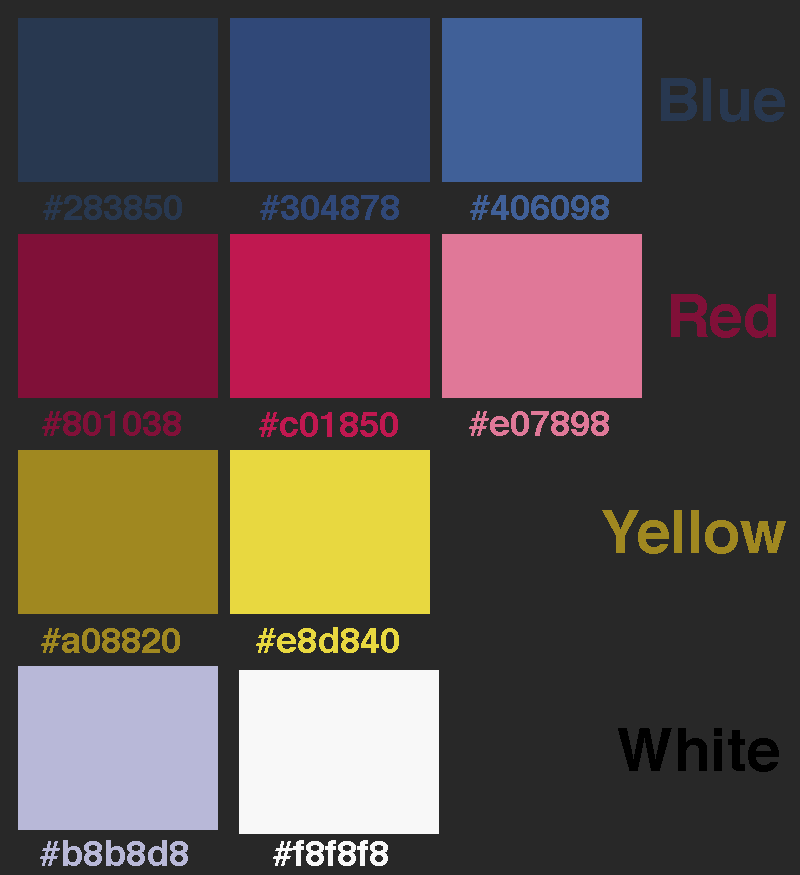
<style>
.page{position:relative;width:800px;height:875px;background:#282828}
.page>*{position:absolute;margin:0}
.t1{font:60px "Helvetica-Bold";color:#283850}
.t2{font:36px "Helvetica-Bold";color:#283850}
.t3{font:36px "Helvetica-Bold";color:#304878}
.t4{font:36px "Helvetica-Bold";color:#406098}
.t5{font:60px "Helvetica-Bold";color:#801038}
.t6{font:36px "Helvetica-Bold";color:#801038}
.t7{font:36px "Helvetica-Bold";color:#c01850}
.t8{font:36px "Helvetica-Bold";color:#e07898}
.t9{font:60px "Helvetica-Bold";color:#a08820}
.t10{font:36px "Helvetica-Bold";color:#a08820}
.t11{font:36px "Helvetica-Bold";color:#e8d840}
.t12{font:60px "Helvetica-Bold";color:#000000}
.t13{font:36px "Helvetica-Bold";color:#b8b8d8}
.t14{font:36px "Helvetica-Bold";color:#f8f8f8}
</style>
<div class="page">
<p class="t1" style="left:661px;top:78px;width:124px;height:44px">Blue</p>
<p class="t2" style="left:43px;top:195px;width:139px;height:25px">#283850</p>
<p class="t3" style="left:260px;top:195px;width:139px;height:25px">#304878</p>
<p class="t4" style="left:470px;top:195px;width:139px;height:25px">#406098</p>
<p class="t5" style="left:671px;top:294px;width:105px;height:44px">Red</p>
<p class="t6" style="left:42px;top:411px;width:139px;height:25px">#801038</p>
<p class="t7" style="left:259px;top:412px;width:139px;height:25px">#c01850</p>
<p class="t8" style="left:469px;top:411px;width:140px;height:25px">#e07898</p>
<p class="t9" style="left:602px;top:510px;width:184px;height:44px">Yellow</p>
<p class="t10" style="left:41px;top:628px;width:139px;height:25px">#a08820</p>
<p class="t11" style="left:256px;top:627px;width:143px;height:26px">#e8d840</p>
<p class="t12" style="left:618px;top:728px;width:161px;height:44px">White</p>
<p class="t13" style="left:40px;top:840px;width:148px;height:26px">#b8b8d8</p>
<p class="t14" style="left:273px;top:840px;width:115px;height:26px">#f8f8f8</p>
</div>
